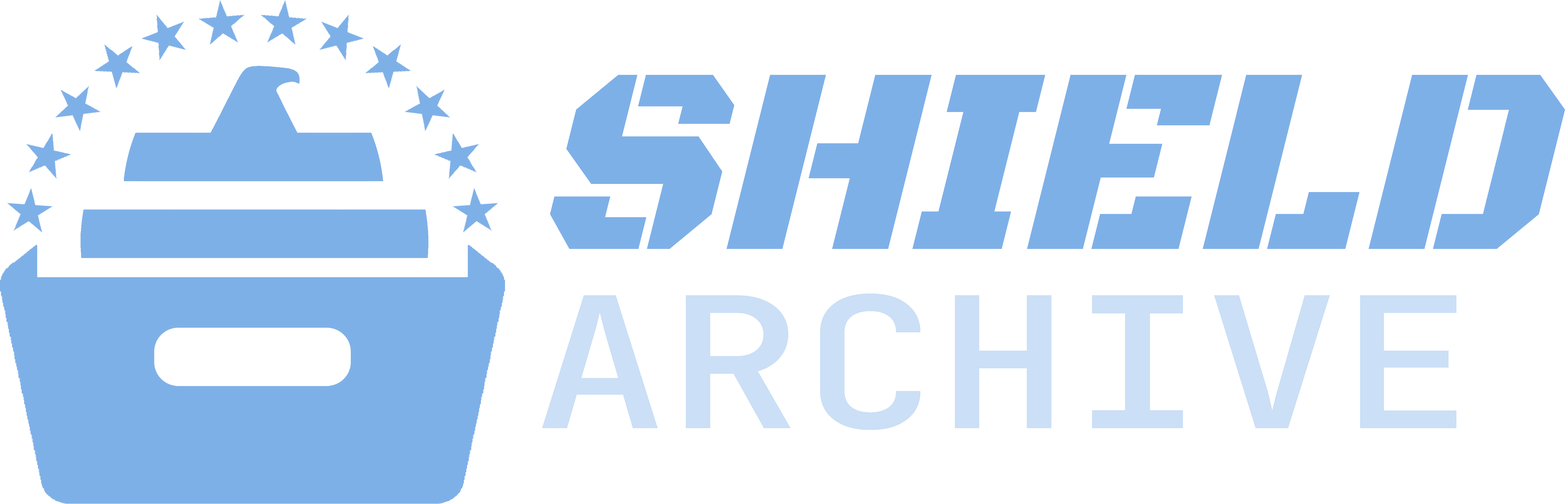
<style>
.page{position:relative;width:1568px;height:504px;background:#ffffff}
.page>*{position:absolute;margin:0}
.t1{font:276.8px "BlackOpsOne-Regular";letter-spacing:-0.005em;color:#7eb0e8;scale:0.93 1}
.t2{font:181.8px "JetBrainsMonoNF-SemiBold";color:#cbdff6;scale:1.23 1}
</style>
<div class="page">
<p class="t1" style="left:550px;top:75px;width:1015px;height:174px">SHIELD</p>
<p class="t2" style="left:542px;top:294px;width:914px;height:136px">ARCHIVE</p>
</div>
